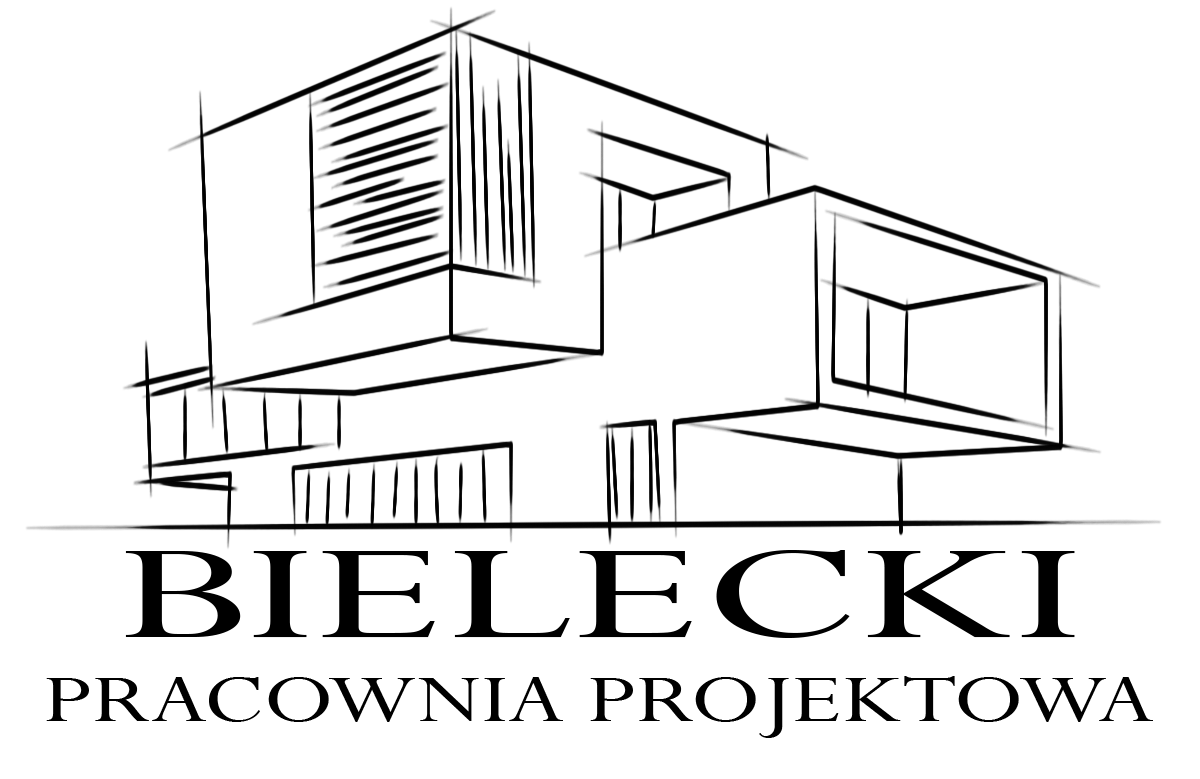
<style>
.page{position:relative;width:1200px;height:779px;background:#ffffff}
.page>*{position:absolute;margin:0}
.t1{font:150px "Perpetua";color:#000000;scale:1.7 1}
.t2{font:75px "Perpetua";color:#000000;scale:1.3 1}
</style>
<div class="page">
<p class="t1" style="left:125px;top:550px;width:950px;height:88px">BIELECKI</p>
<p class="t2" style="left:46px;top:676px;width:1107px;height:62px">PRACOWNIA PROJEKTOWA</p>
</div>
